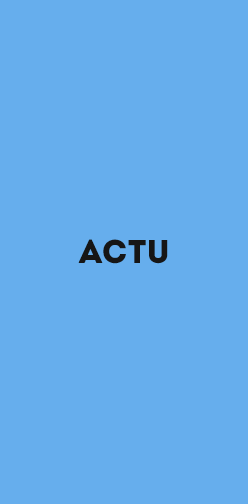
<style>
.page{position:relative;width:248px;height:504px;background:#66aeed}
.page>*{position:absolute;margin:0}
.t1{font:33px "Intro";color:#161616;font-variant:small-caps}
</style>
<div class="page">
<p class="t1" style="left:78px;top:239px;width:90px;height:25px">ACTU</p>
</div>
